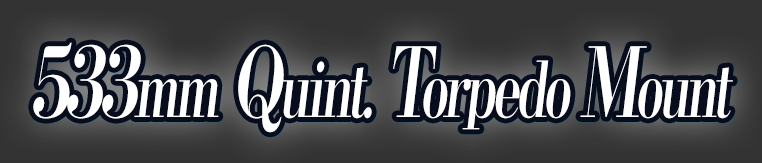
<style>
.page{position:relative;width:762px;height:163px}
.page>*{position:absolute;margin:0}
.t1{font:76.8px "KochoStd-Heavy";letter-spacing:-0.08em;color:#ffffff;font-style:italic;scale:0.67 1}
.t2{font:96px "KochoStd-Heavy";letter-spacing:-0.08em;color:#ffffff;font-style:italic;scale:0.67 1}
</style>
<div class="page">
<p class="t1" style="left:33px;top:42px;width:700px;height:91px"><span class="t2">533</span>mm<span class="t2"> Q</span>uint.<span class="t2"> T</span>orpedo <span class="t2">M</span>ount</p>
</div>
